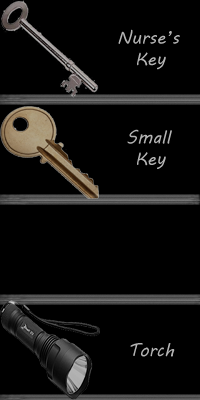
<style>
.page{position:relative;width:200px;height:400px;background:#000000}
.page>*{position:absolute;margin:0}
.t1{font:18px "MVBoli";color:#b3b3b3}
</style>
<div class="page">
<p class="t1" style="left:118px;top:29px;width:62px;height:41px">Nurse’s<br>  Key</p>
<p class="t1" style="left:127px;top:129px;width:45px;height:40px">Small<br> Key</p>
<p class="t1" style="left:130px;top:343px;width:45px;height:14px">Torch</p>
</div>
